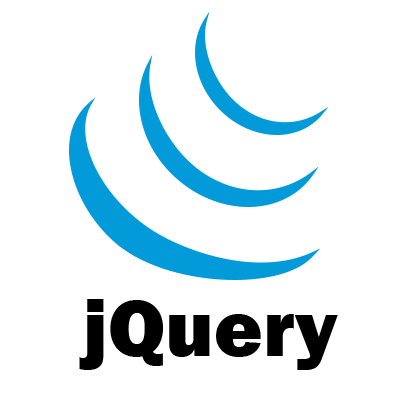
<style>
.page{position:relative;width:400px;height:400px;background:#ffffff}
.page>*{position:absolute;margin:0}
.t1{font:83.3px "FranklinGothic-Heavy";color:#000000}
</style>
<div class="page">
<p class="t1" style="left:79px;top:299px;width:259px;height:71px">jQuery</p>
</div>
